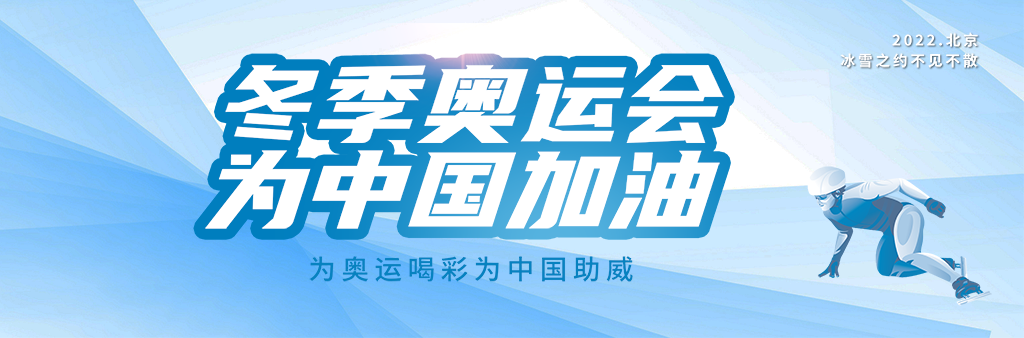
<style>
.page{position:relative;width:1024px;height:338px}
.page>*{position:absolute;margin:0}
.t1{font:14.6px "SourceHanSansSC-Bold";letter-spacing:0.2em;color:#ffffff}
.t2{font:108.1px "YouSheBiaoTiHei";color:#ffffff;font-style:italic}
.t3{font:27px "SourceHanSansSC-Medium";letter-spacing:0.2em;color:#0682c0}
</style>
<div class="page">
<p class="t1" style="left:892px;top:32px;width:86px;height:15px">2022.北京</p>
<p class="t1" style="left:840px;top:53px;width:138px;height:15px">冰雪之约不见不散</p>
<p class="t2" style="left:225px;top:65px;width:499px;height:78px">冬季奥运会</p>
<p class="t2" style="left:205px;top:150px;width:515px;height:79px">为中国加油</p>
<p class="t3" style="left:309px;top:256px;width:324px;height:26px">为奥运喝彩为中国助威</p>
</div>
